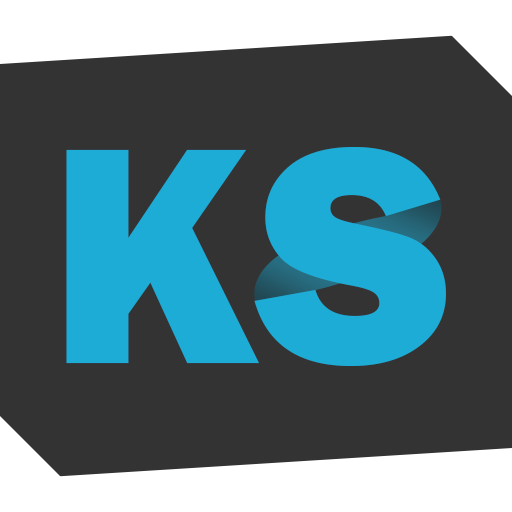
<style>
.page{position:relative;width:512px;height:512px;background:#333333}
.page>*{position:absolute;margin:0}
.t1{font:320px "FranklinGothic-Heavy";color:#1dacd6}
</style>
<div class="page">
<p class="t1" style="left:66px;top:146px;width:380px;height:220px">KS</p>
</div>
